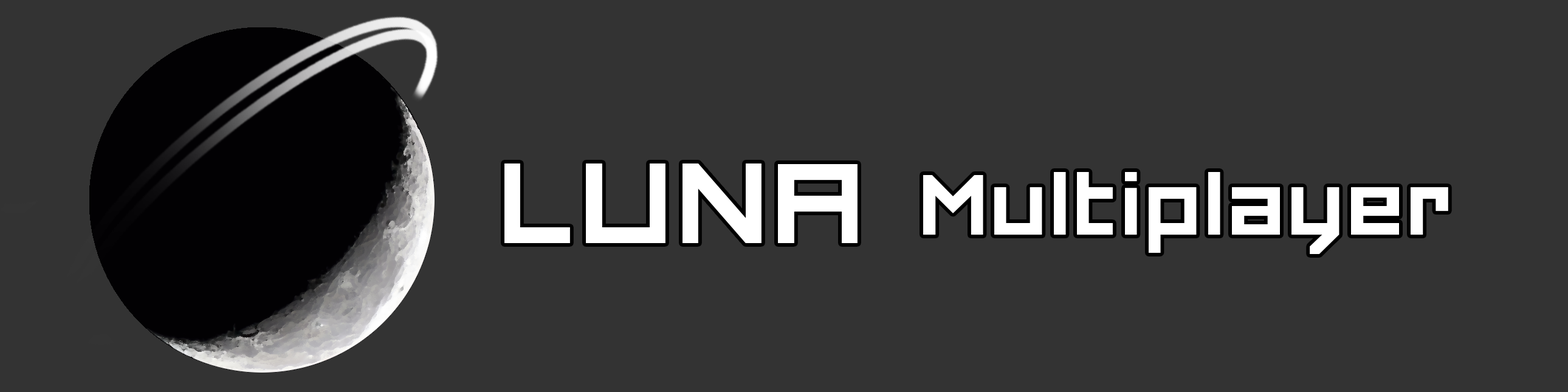
<style>
.page{position:relative;width:1568px;height:392px;background:#333333}
.page>*{position:absolute;margin:0}
.t1{font:151.9px "FORCED-SQUARE";color:#ffffff}
.t2{font:113.9px "FORCED-SQUARE";color:#ffffff}
</style>
<div class="page">
<p class="t1" style="left:504px;top:163px;width:354px;height:80px">LUNA</p>
<p class="t2" style="left:923px;top:172px;width:525px;height:82px">Multiplayer</p>
</div>
